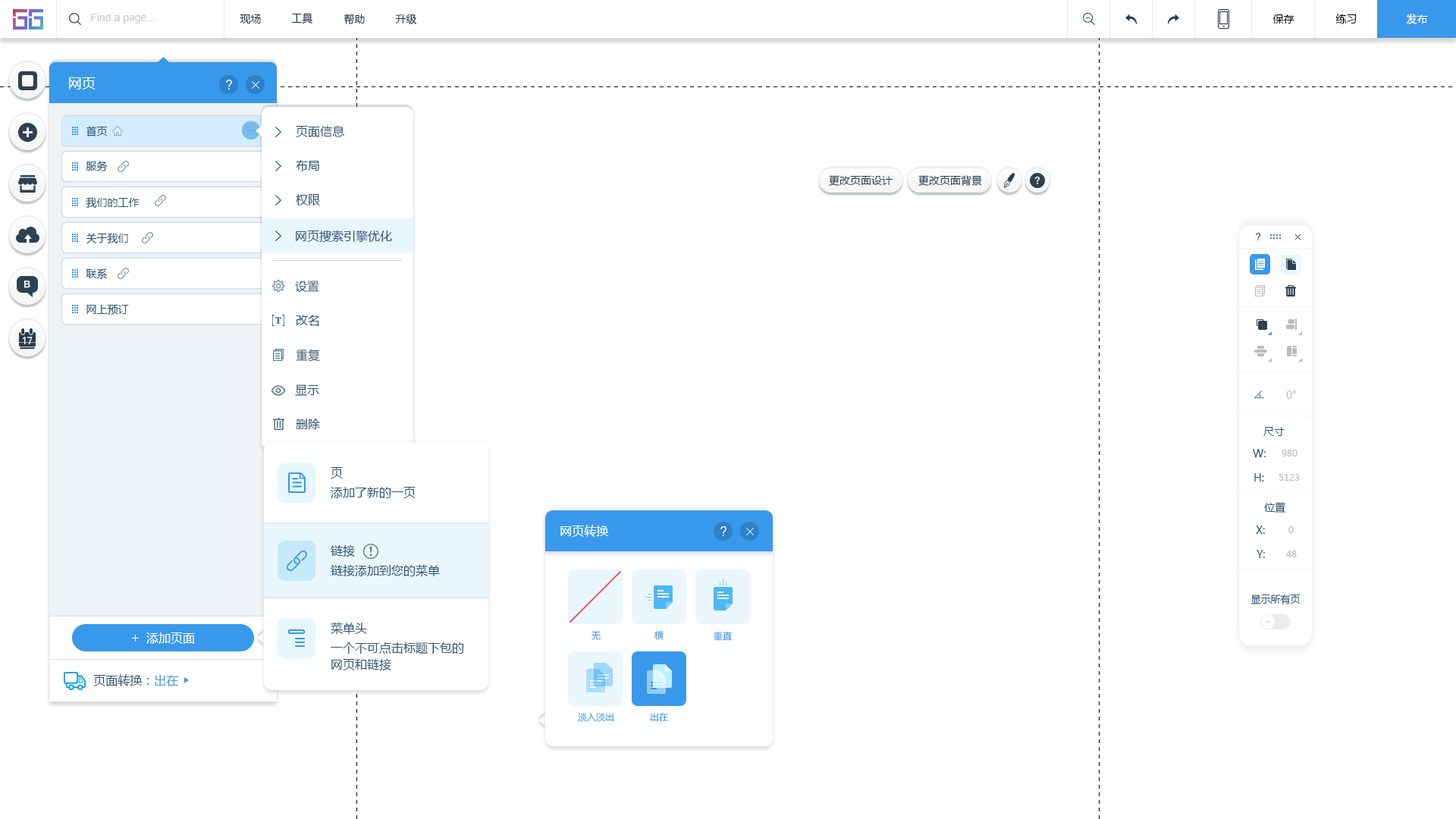
<style>
.page{position:relative;width:1456px;height:819px;background:#ffffff}
.page>*{position:absolute;margin:0}
.t1{font:10.6px "ArialMT";color:#cccccc}
.t2{font:10.6px "MicrosoftYaHei";color:#20303c}
.t3{font:10.6px "MicrosoftYaHei";color:#000000}
.t4{font:10.6px "MicrosoftYaHei";color:#ffffff}
.t5{font:13.6px "MicrosoftYaHei";color:#ffffff}
.t6{font:10.6px "MicrosoftYaHei";color:#2b5672}
.t7{font:12.1px "MicrosoftYaHei";color:#2b5672}
.t8{font:10.6px "MicrosoftYaHei";color:#2d4150}
.t9{font:10.6px "MicrosoftYaHei";color:#bcbcbc}
.t10{font:9.1px "MicrosoftYaHei";color:#bcbcbc}
.t11{font:12.1px "MicrosoftYaHei";color:#ffffff}
.t12{font:9.9px "MicrosoftYaHei";color:#2b5672}
.t13{font:9.1px "MicrosoftYaHei";color:#3899ec}
.t14{font:9.1px "MicrosoftYaHei"}
.t15{font:12.1px/16.7px "MicrosoftYaHei";color:#2b5672}
.t16{font:9.1px "MicrosoftYaHei";color:#2b5672}
</style>
<div class="page">
<p class="t1" style="left:91px;top:14px;width:64px;height:10px">Find a page...</p>
<p class="t2" style="left:240px;top:14px;width:21px;height:10px">现场</p>
<p class="t2" style="left:291px;top:13px;width:22px;height:11px">工具</p>
<p class="t2" style="left:344px;top:14px;width:21px;height:11px">帮助</p>
<p class="t2" style="left:395px;top:14px;width:22px;height:10px">升级</p>
<p class="t3" style="left:1272px;top:14px;width:22px;height:10px">保存</p>
<p class="t3" style="left:1335px;top:14px;width:22px;height:10px">练习</p>
<p class="t4" style="left:1406px;top:14px;width:22px;height:10px">发布</p>
<p class="t5" style="left:69px;top:77px;width:27px;height:12px">网页</p>
<p class="t6" style="left:86px;top:126px;width:22px;height:10px">首页</p>
<p class="t7" style="left:296px;top:125px;width:48px;height:12px">页面信息</p>
<p class="t6" style="left:86px;top:161px;width:22px;height:10px">服务</p>
<p class="t7" style="left:296px;top:160px;width:23px;height:11px">布局</p>
<p class="t8" style="left:829px;top:175px;width:64px;height:11px">更改页面设计</p>
<p class="t8" style="left:918px;top:175px;width:64px;height:11px">更改页面背景</p>
<p class="t6" style="left:86px;top:197px;width:54px;height:12px">我们的工作</p>
<p class="t7" style="left:296px;top:194px;width:24px;height:12px">权限</p>
<p class="t6" style="left:86px;top:233px;width:42px;height:11px">关于我们</p>
<p class="t7" style="left:296px;top:230px;width:96px;height:13px">网页搜索引擎优化</p>
<p class="t6" style="left:86px;top:268px;width:21px;height:11px">联系</p>
<p class="t7" style="left:295px;top:281px;width:24px;height:11px">设置</p>
<p class="t6" style="left:86px;top:304px;width:43px;height:11px">网上预订</p>
<p class="t7" style="left:296px;top:315px;width:23px;height:11px">改名</p>
<p class="t7" style="left:296px;top:349px;width:24px;height:13px">重复</p>
<p class="t7" style="left:295px;top:384px;width:24px;height:12px">显示</p>
<p class="t9" style="left:1286px;top:391px;width:11px;height:8px">0°</p>
<p class="t7" style="left:296px;top:419px;width:24px;height:10px">删除</p>
<p class="t6" style="left:1263px;top:427px;width:22px;height:9px">尺寸</p>
<p class="t6" style="left:1253px;top:449px;width:13px;height:8px">W:</p>
<p class="t10" style="left:1282px;top:450px;width:15px;height:7px">980</p>
<p class="t7" style="left:331px;top:467px;width:12px;height:12px">页</p>
<p class="t6" style="left:1254px;top:473px;width:10px;height:9px">H:</p>
<p class="t10" style="left:1279px;top:474px;width:21px;height:7px">5123</p>
<p class="t7" style="left:331px;top:487px;width:85px;height:11px">添加了新的一页</p>
<p class="t6" style="left:1264px;top:502px;width:22px;height:11px">位置</p>
<p class="t11" style="left:560px;top:525px;width:49px;height:12px">网页转换</p>
<p class="t6" style="left:1256px;top:526px;width:9px;height:8px">X:</p>
<p class="t10" style="left:1288px;top:526px;width:6px;height:7px">0</p>
<p class="t7" style="left:331px;top:544px;width:24px;height:13px">链接</p>
<p class="t6" style="left:1257px;top:550px;width:8px;height:8px">Y:</p>
<p class="t10" style="left:1286px;top:551px;width:11px;height:6px">48</p>
<p class="t7" style="left:331px;top:564px;width:109px;height:13px">链接添加到您的菜单</p>
<p class="t12" style="left:1250px;top:594px;width:51px;height:10px">显示所有页</p>
<p class="t7" style="left:331px;top:622px;width:36px;height:13px">菜单头</p>
<p class="t11" style="left:146px;top:632px;width:49px;height:12px">添加页面</p>
<p class="t13" style="left:591px;top:631px;width:10px;height:9px">无</p>
<p class="t14" style="left:654px;top:630px;width:10px;height:10px">横</p>
<p class="t14" style="left:714px;top:631px;width:19px;height:10px">垂直</p>
<p class="t15" style="left:331px;top:642px;width:133px;height:28px">一个不可点击标题下包的<br>网页和链接</p>
<p class="t16" style="left:93px;top:674px;width:86px;height:12px">页面转换：<span class="t13">出在</span></p>
<p class="t13" style="left:578px;top:713px;width:35px;height:9px">淡入淡出</p>
<p class="t13" style="left:651px;top:712px;width:17px;height:10px">出在</p>
</div>
